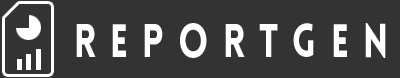
<style>
.page{position:relative;width:400px;height:78px;background:#333333}
.page>*{position:absolute;margin:0}
.t1{font:46.3px "LoveloBlack";letter-spacing:0.4em;color:#ffffff;scale:0.77 1}
</style>
<div class="page">
<p class="t1" style="left:76px;top:23px;width:310px;height:35px">REPORTGEN</p>
</div>
